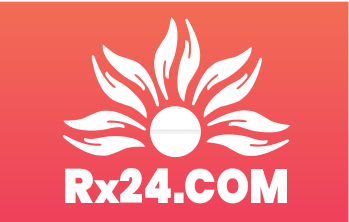
<style>
.page{position:relative;width:349px;height:222px}
.page>*{position:absolute;margin:0}
.t1{font:48px "Poppins-Black";color:#ffffff;scale:0.88 1}
.t2{font:48.2px "Poppins-Black";color:#ffffff;scale:0.95 1}
.t3{font:40.2px "Poppins-Black";color:#ffffff;scale:0.95 1}
</style>
<div class="page">
<p class="t1" style="left:65px;top:168px;width:222px;height:36px"><span class="t2">R</span><span class="t3">x</span>24.COM</p>
</div>
